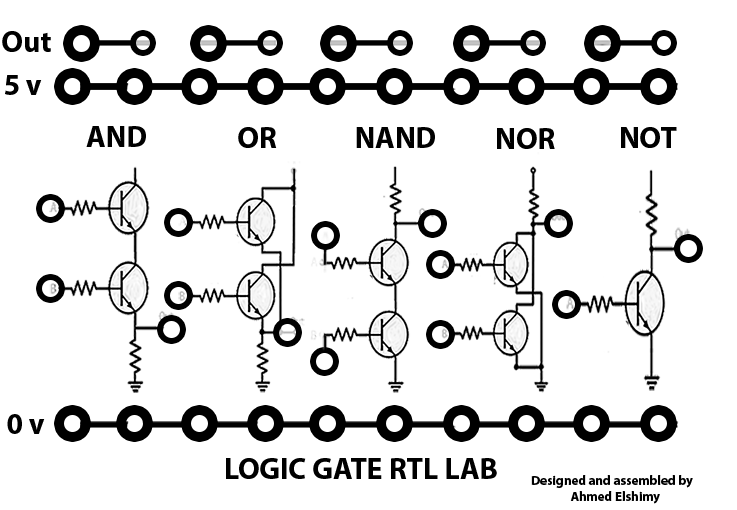
<style>
.page{position:relative;width:737px;height:510px;background:#ffffff}
.page>*{position:absolute;margin:0}
.t1{font:30px "MyriadPro-Bold";color:#000000}
.t2{font:13px "MyriadPro-Bold";color:#000000}
</style>
<div class="page">
<p class="t1" style="left:2px;top:31px;width:49px;height:21px">Out</p>
<p class="t1" style="left:5px;top:75px;width:37px;height:20px">5 v</p>
<p class="t1" style="left:86px;top:126px;width:60px;height:21px">AND</p>
<p class="t1" style="left:238px;top:127px;width:39px;height:21px">OR</p>
<p class="t1" style="left:356px;top:127px;width:79px;height:21px">NAND</p>
<p class="t1" style="left:497px;top:128px;width:58px;height:21px">NOR</p>
<p class="t1" style="left:621px;top:127px;width:56px;height:21px">NOT</p>
<p class="t1" style="left:7px;top:414px;width:38px;height:20px">0 v</p>
<p class="t1" style="left:226px;top:458px;width:271px;height:21px">LOGIC GATE RTL LAB</p>
<p class="t2" style="left:531px;top:475px;width:162px;height:29px">Designed and assembled by<br>               Ahmed Elshimy</p>
</div>
